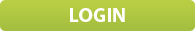
<style>
.page{position:relative;width:195px;height:31px}
.page>*{position:absolute;margin:0}
.t1{font:20px "MyriadPro-Bold";color:#ffffff}
</style>
<div class="page">
<p class="t1" style="left:70px;top:8px;width:55px;height:14px">LOGIN</p>
</div>
